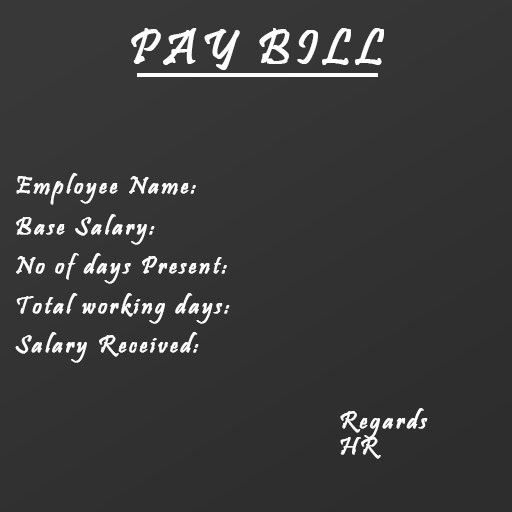
<style>
.page{position:relative;width:512px;height:512px}
.page>*{position:absolute;margin:0}
.t1{font:50px "Pristina-Regular";letter-spacing:0.1em;color:#ffffff;font-weight:bold}
.t2{font:25px "Pristina-Regular";letter-spacing:0.1em;color:#ffffff;font-weight:bold}
</style>
<div class="page">
<p class="t1" style="left:131px;top:28px;width:253px;height:42px">PAY BILL</p>
<p class="t2" style="left:16px;top:173px;width:180px;height:32px">Employee Name:</p>
<p class="t2" style="left:16px;top:214px;width:139px;height:31px">Base Salary:</p>
<p class="t2" style="left:16px;top:253px;width:211px;height:31px">No of days Present:</p>
<p class="t2" style="left:16px;top:293px;width:214px;height:31px">Total working days:</p>
<p class="t2" style="left:15px;top:332px;width:184px;height:31px">Salary Received:</p>
<p class="t2" style="left:340px;top:408px;width:88px;height:31px">Regards</p>
<p class="t2" style="left:340px;top:437px;width:41px;height:22px">HR</p>
</div>
